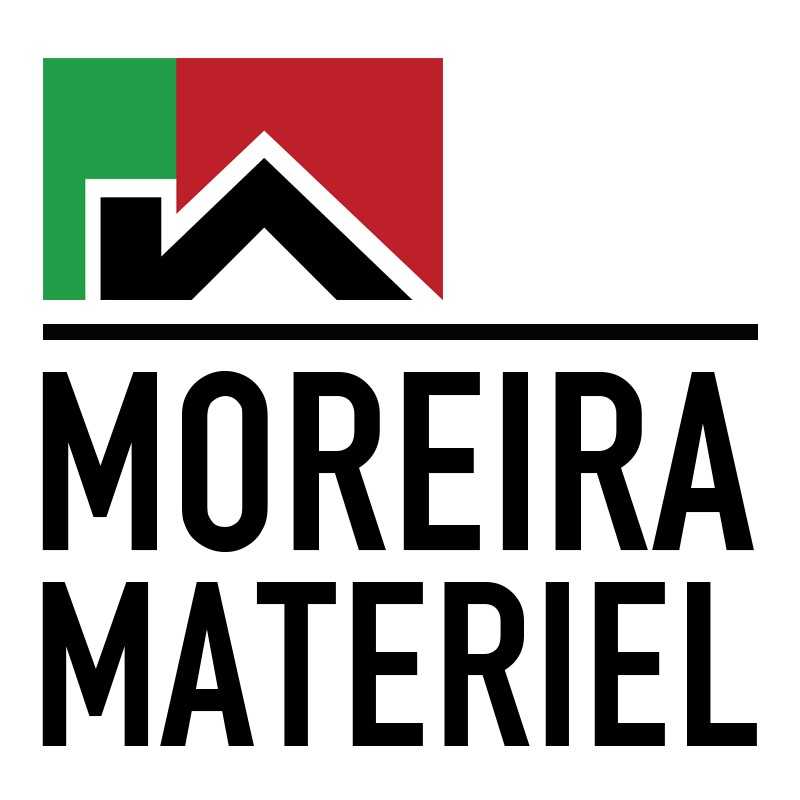
<style>
.page{position:relative;width:800px;height:800px;background:#ffffff}
.page>*{position:absolute;margin:0}
.t1{font:266.7px "FetteEngschrift";color:#000000}
.t2{font:245.8px "FetteEngschrift";color:#000000}
</style>
<div class="page">
<p class="t1" style="left:42px;top:371px;width:712px;height:181px">MOREIRA</p>
<p class="t2" style="left:42px;top:582px;width:715px;height:164px">MATERIEL</p>
</div>
